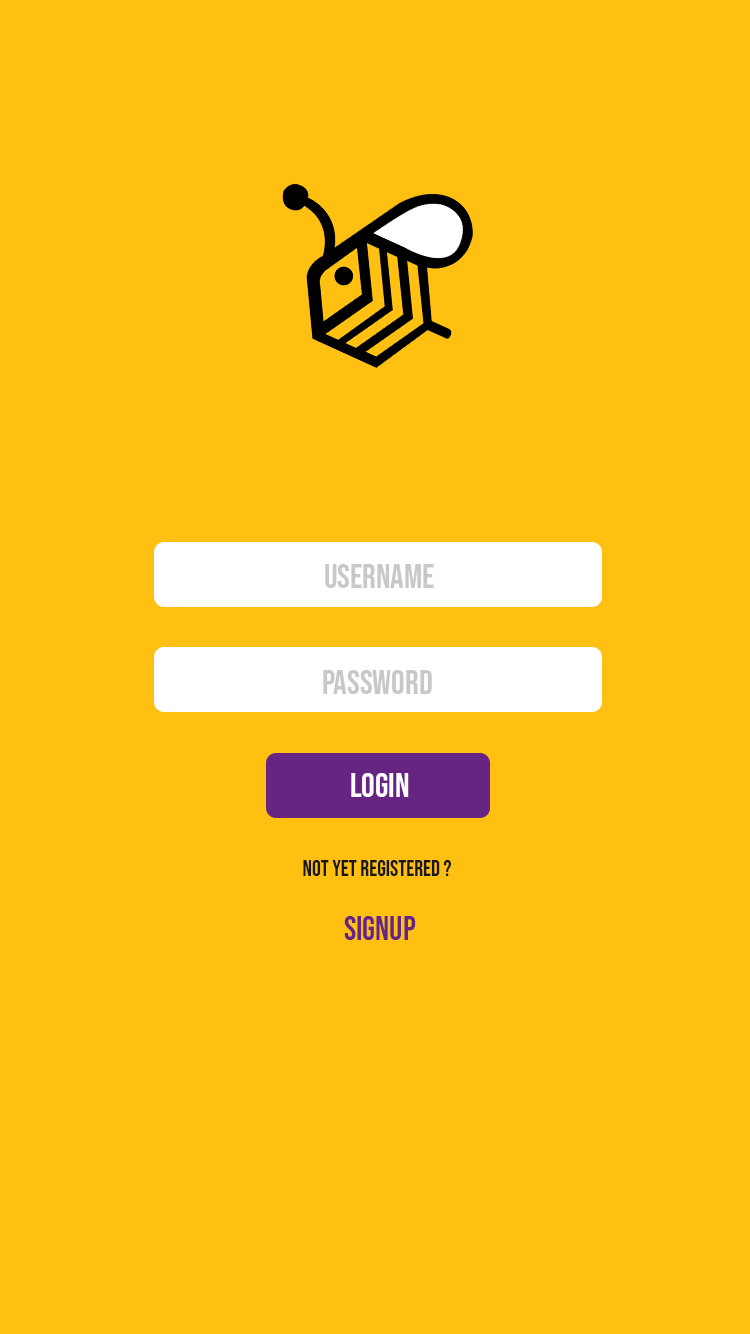
<style>
.page{position:relative;width:750px;height:1334px;background:#ffc012}
.page>*{position:absolute;margin:0}
.t1{font:34px "BebasNeue-Regular";color:#c8c8c8}
.t2{font:34px "BebasNeue-Regular";color:#ffffff}
.t3{font:22px "BebasNeue-Regular";color:#181818}
.t4{font:33px "BebasNeue-Regular";color:#662483}
</style>
<div class="page">
<p class="t1" style="left:325px;top:564px;width:109px;height:24px">USERNAME</p>
<p class="t1" style="left:323px;top:670px;width:109px;height:24px">PASSWORD</p>
<p class="t2" style="left:351px;top:773px;width:58px;height:24px">LOGIN</p>
<p class="t3" style="left:303px;top:860px;width:148px;height:16px">Not yet registered ?</p>
<p class="t4" style="left:344px;top:916px;width:72px;height:24px">SIGNUP</p>
</div>
